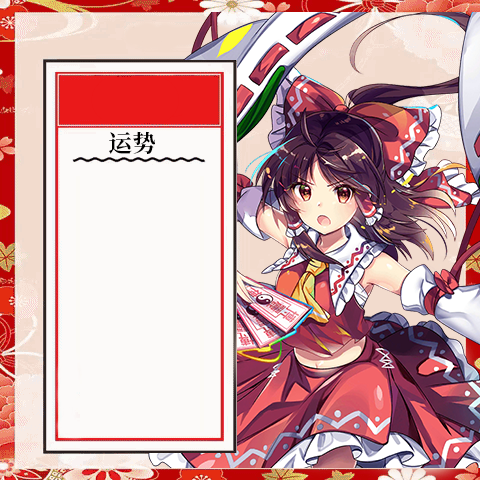
<style>
.page{position:relative;width:480px;height:480px;background:#fcfaf9}
.page>*{position:absolute;margin:0}
.t1{font:24px "NotoSerifSC-Bold";color:#000000}
</style>
<div class="page">
<p class="t1" style="left:109px;top:131px;width:46px;height:23px">运势</p>
</div>
